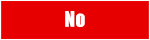
<style>
.page{position:relative;width:150px;height:40px;background:#e70000}
.page>*{position:absolute;margin:0}
.t1{font:20px "Impact";color:#fefffe}
</style>
<div class="page">
<p class="t1" style="left:65px;top:11px;width:20px;height:16px">No</p>
</div>
